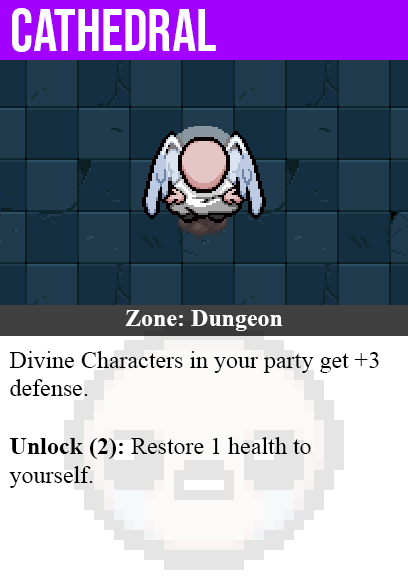
<style>
.page{position:relative;width:408px;height:585px;background:#ffffff}
.page>*{position:absolute;margin:0}
.t1{font:60px "BebasNeue-Regular";color:#ffffff}
.t2{font:24px "TimesNewRomanPS-BoldMT";color:#ffffff}
.t3{font:24px "TimesNewRomanPSMT";color:#000000}
.t4{font:24px "TimesNewRomanPS-BoldMT";color:#000000}
</style>
<div class="page">
<p class="t1" style="left:12px;top:8px;width:204px;height:44px">cathedral</p>
<p class="t2" style="left:125px;top:310px;width:158px;height:21px">Zone: Dungeon</p>
<p class="t3" style="left:9px;top:351px;width:370px;height:137px">Divine Characters in your party get +3<br>defense.<br><br><span class="t4">Unlock (2):</span> Restore 1 health to<br>yourself.</p>
</div>
